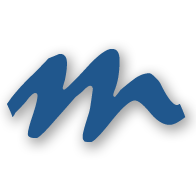
<style>
.page{position:relative;width:196px;height:196px;background:#ffffff}
.page>*{position:absolute;margin:0}
.t1{font:280px "Mistral";color:#20578d}
</style>
<div class="page">
<p class="t1" style="left:7px;top:49px;width:179px;height:93px">m</p>
</div>
